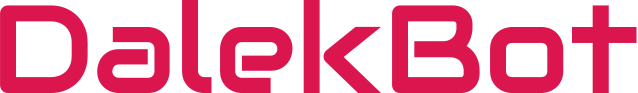
<style>
.page{position:relative;width:638px;height:93px;background:#ffffff}
.page>*{position:absolute;margin:0}
.t1{font:125px "Audiowide-Regular";color:#db164e}
</style>
<div class="page">
<p class="t1" style="left:0px;top:0px;width:637px;height:93px">DalekBot</p>
</div>
